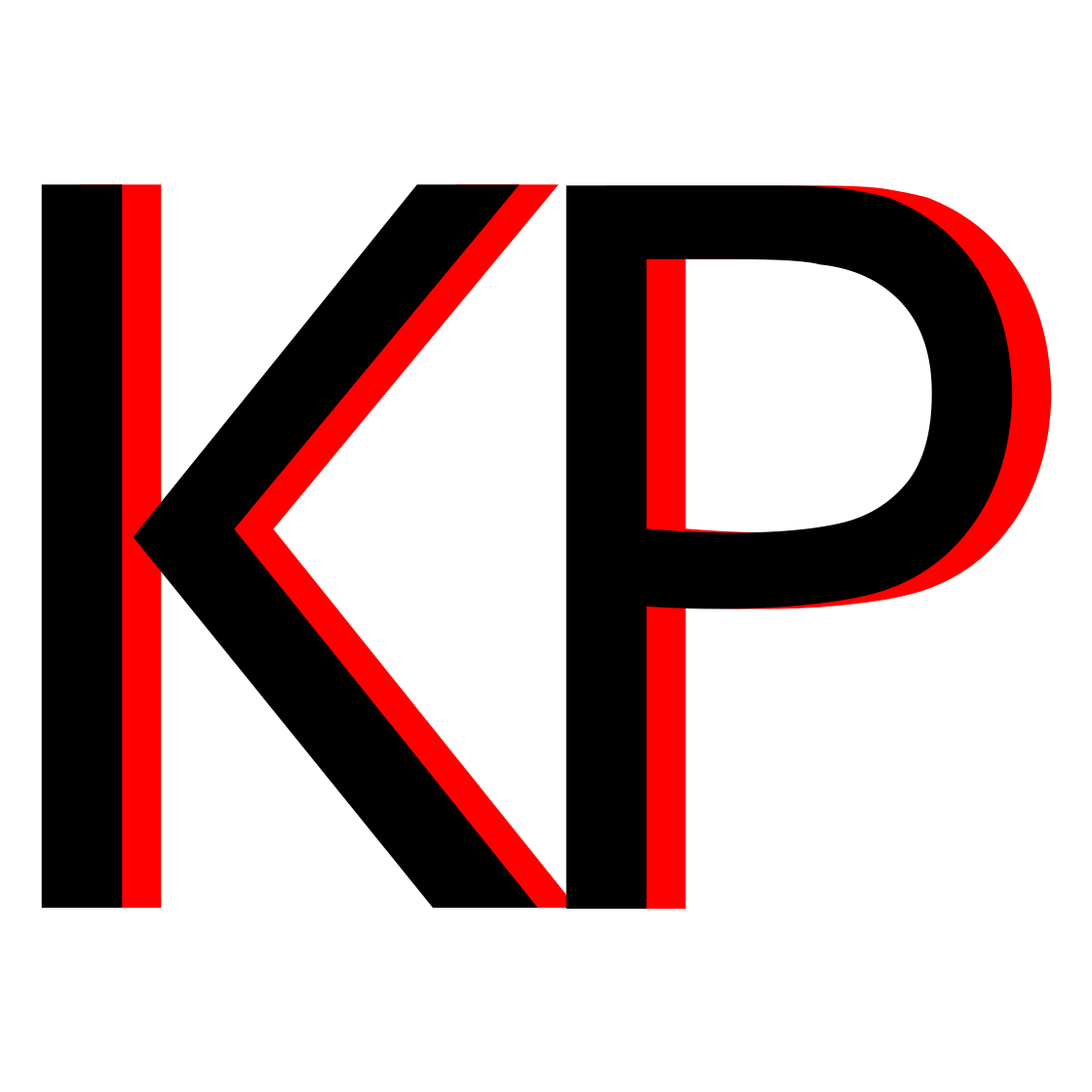
<style>
.page{position:relative;width:1092px;height:1092px;background:#ffffff}
.page>*{position:absolute;margin:0}
.t1{font:1314.7px "CambayDevanagari-Regular";color:#000000;scale:0.93 1}
.t2{font:1314.7px "CambayDevanagari-Regular";scale:0.93 1}
</style>
<div class="page">
<p class="t1" style="left:41px;top:184px;width:497px;height:724px">K</p>
<p class="t2" style="left:80px;top:184px;width:497px;height:724px">K</p>
<p class="t1" style="left:565px;top:185px;width:448px;height:724px">P</p>
<p class="t2" style="left:604px;top:185px;width:448px;height:724px">P</p>
</div>
